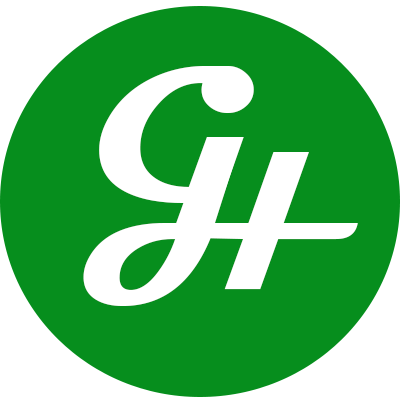
<style>
.page{position:relative;width:400px;height:400px;background:#068e1d}
.page>*{position:absolute;margin:0}
.t1{font:200px "Magneto-Bold";color:#ffffff}
</style>
<div class="page">
<p class="t1" style="left:99px;top:66px;width:155px;height:162px">G</p>
<p class="t1" style="left:83px;top:137px;width:275px;height:169px">H</p>
</div>
